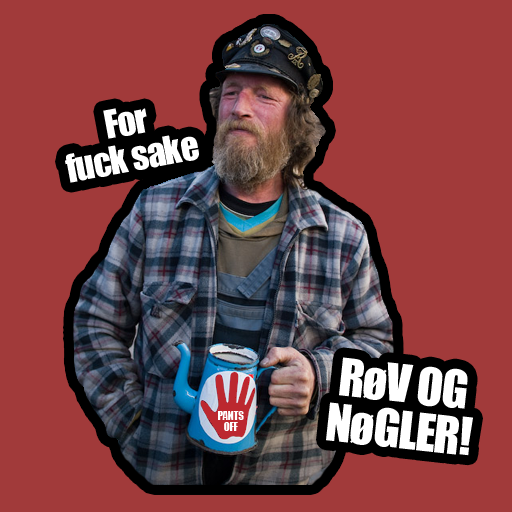
<style>
.page{position:relative;width:512px;height:512px;background:#a13a3a}
.page>*{position:absolute;margin:0}
.t1{font:36px/36px "Impact";letter-spacing:-0.025em;color:#ffffff}
.t2{font:48px/46px "Impact";letter-spacing:-0.025em;color:#ffffff}
.t3{font:11px/11px "Impact";letter-spacing:-0.025em;color:#ffffff}
</style>
<div class="page">
<p class="t1" style="left:65px;top:108px;width:134px;height:75px;text-align:center;rotate:-11deg">For<br>fuck sake</p>
<p class="t2" style="left:326px;top:357px;width:147px;height:99px;text-align:center;rotate:6deg">RøV OG<br>NøGLER!</p>
<p class="t3" style="left:218px;top:411px;width:26px;height:20px;text-align:center">PANTS<br>OFF</p>
</div>
